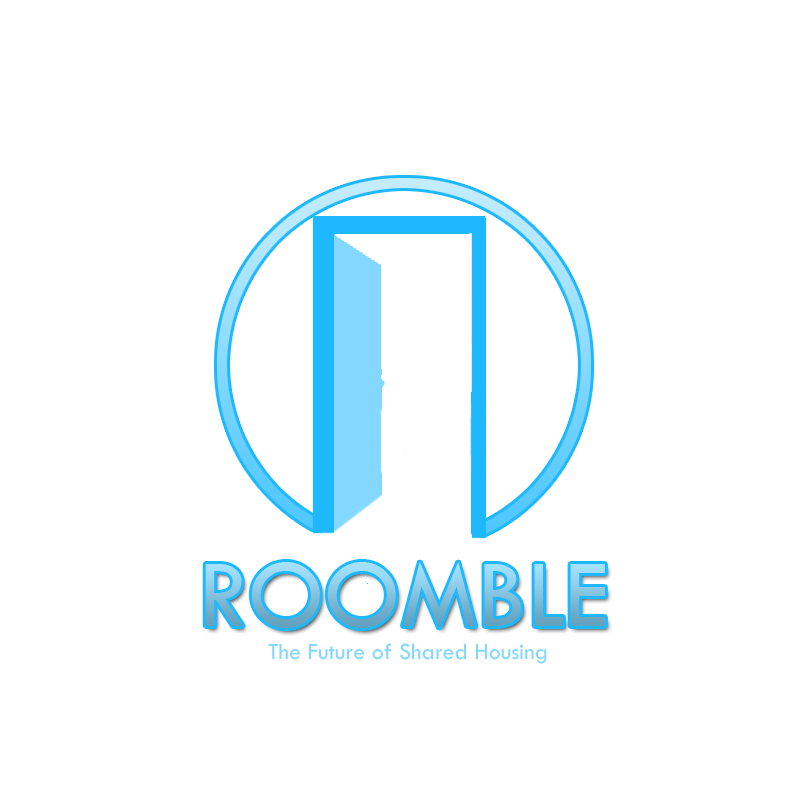
<style>
.page{position:relative;width:800px;height:800px;background:#ffffff}
.page>*{position:absolute;margin:0}
.t1{font:100.1px "TwCenMT-Regular"}
.t2{font:23.9px "TwCenMT-Regular";color:#84d8ff}
</style>
<div class="page">
<p class="t1" style="left:205px;top:562px;width:400px;height:66px">ROOMBLE</p>
<p class="t2" style="left:268px;top:643px;width:279px;height:21px">The Future of Shared Housing</p>
</div>
